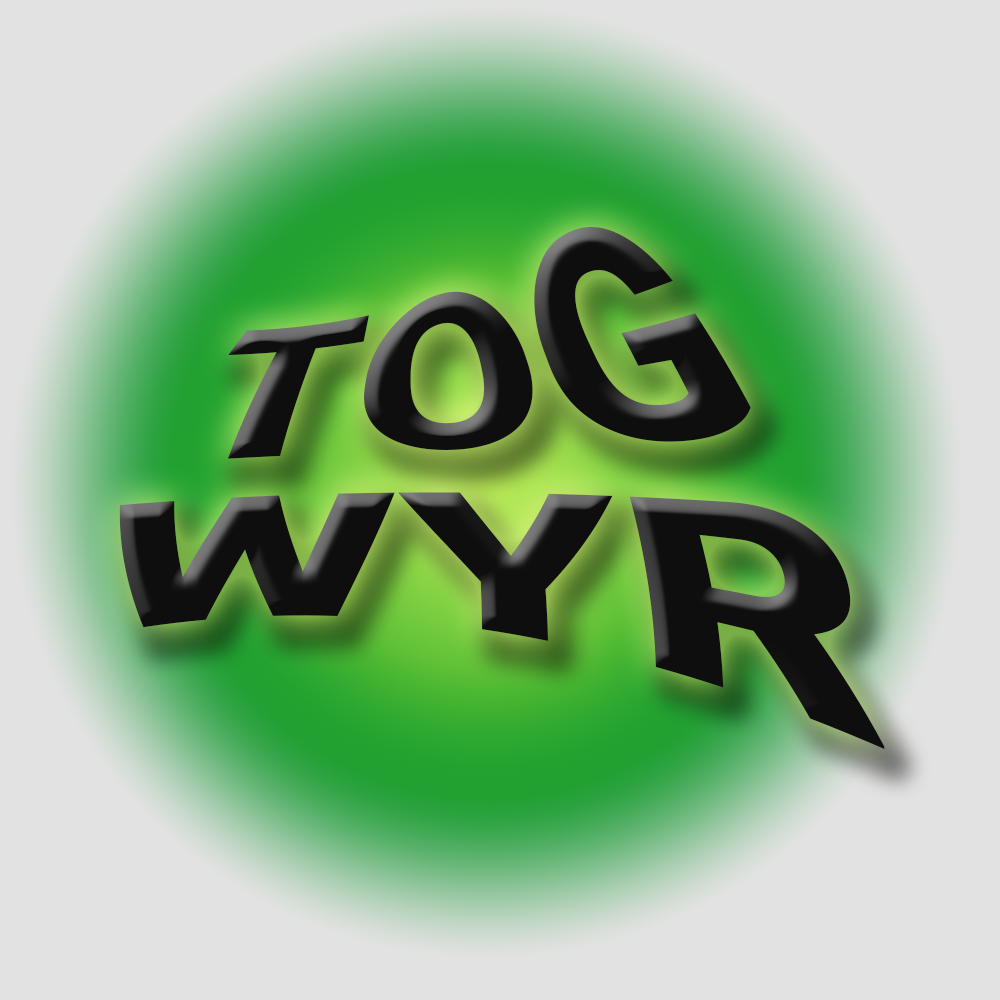
<style>
.page{position:relative;width:1000px;height:1000px;background:#e2e2e2}
.page>*{position:absolute;margin:0}
.t1{font:266.7px/250px "Roboto-Black";color:#0e0e0e}
</style>
<div class="page">
<p class="t1" style="left:119px;top:227px;width:766px;height:522px;text-align:center">TOGWYR</p>
</div>
